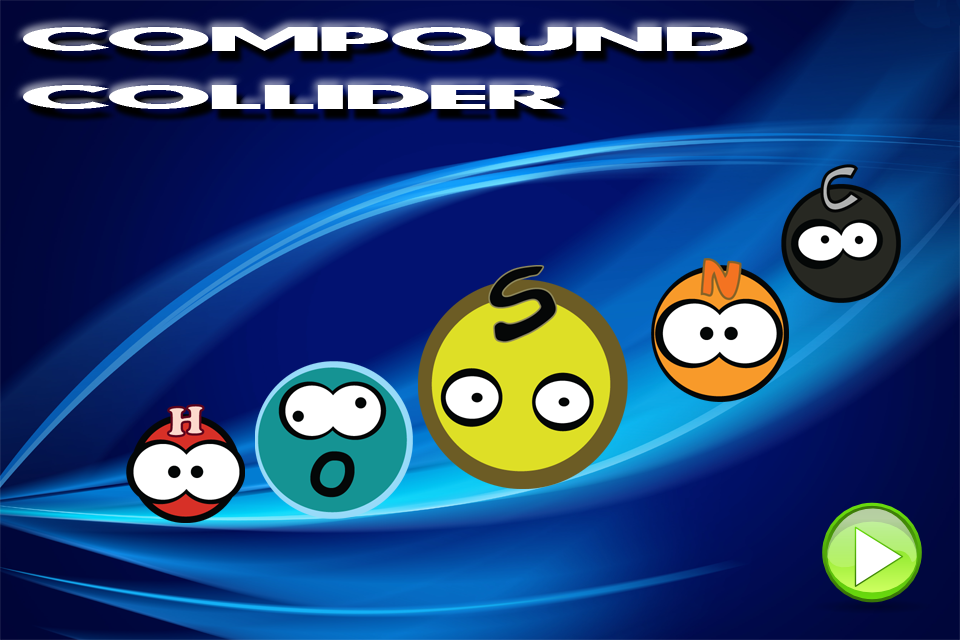
<style>
.page{position:relative;width:960px;height:640px}
.page>*{position:absolute;margin:0}
.t1{font:48px "FirstBlind";color:#ffffff}
</style>
<div class="page">
<p class="t1" style="left:23px;top:27px;width:725px;height:82px">Compound<br>Collider</p>
</div>
